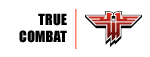
<style>
.page{position:relative;width:150px;height:57px;background:#ffffff}
.page>*{position:absolute;margin:0}
.t1{font:14.2px "Impact";color:#000000}
</style>
<div class="page">
<p class="t1" style="left:19px;top:13px;width:48px;height:30px;text-align:right">TRUE<br>COMBAT</p>
</div>
